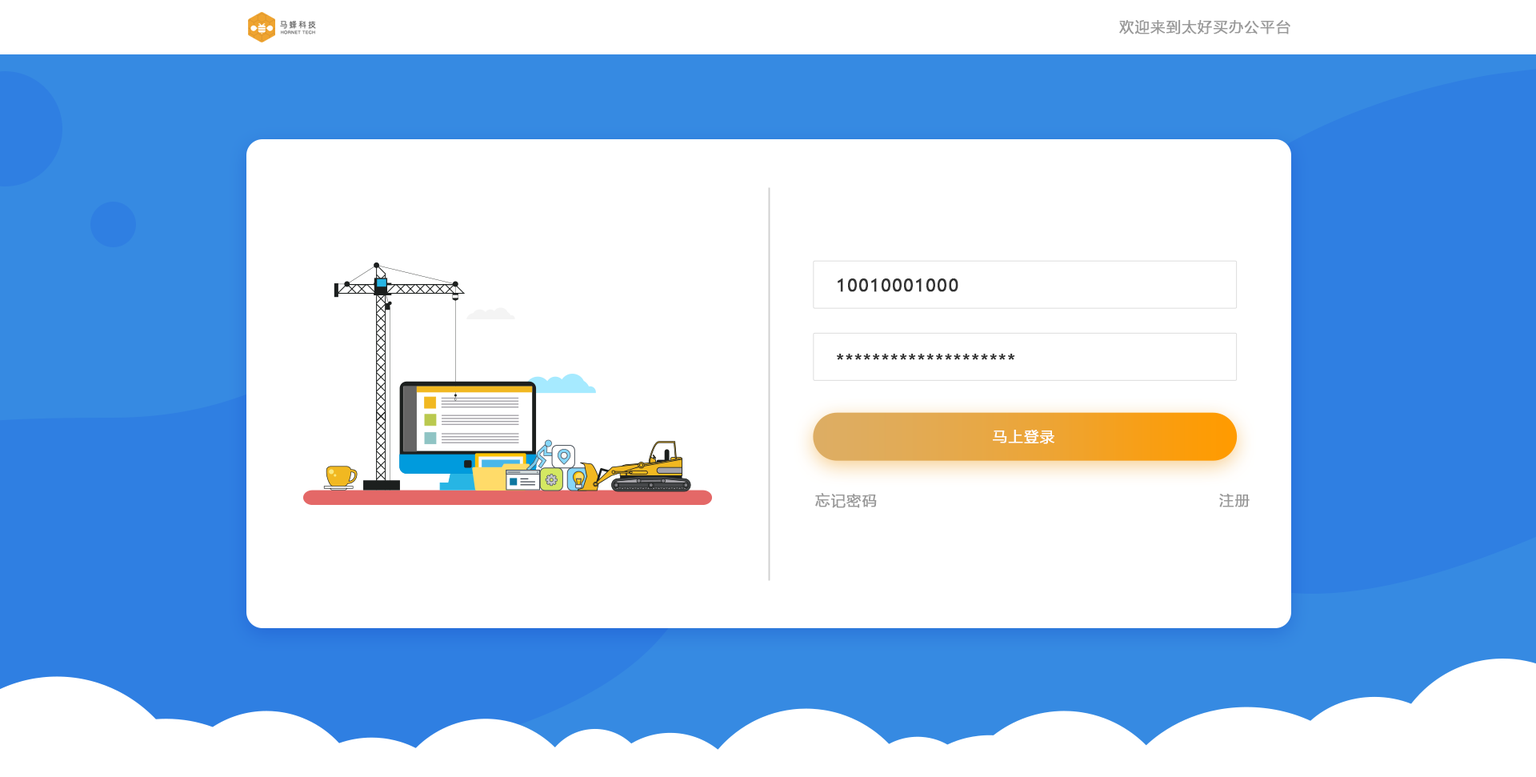
<style>
.page{position:relative;width:1536px;height:777px;background:#ffffff}
.page>*{position:absolute;margin:0}
.t1{font:7.8px "CTZhongYuanSJ";letter-spacing:0.18em;color:#666666}
.t2{font:14.7px "MicrosoftYaHei";letter-spacing:0.03em;color:#999999;font-weight:bold}
.t3{font:4.3px "CTZhongYuanSJ";letter-spacing:0.06em}
.t4{font:17.1px "MicrosoftYaHei";letter-spacing:0.03em;color:#333333;font-weight:bold}
.t5{font:14.7px "MicrosoftYaHei";letter-spacing:0.03em;color:#ffffff;font-weight:bold}
</style>
<div class="page">
<p class="t1" style="left:280px;top:21px;width:36px;height:8px">马蜂科技</p>
<p class="t2" style="left:1119px;top:20px;width:171px;height:14px">欢迎来到太好买办公平台</p>
<p class="t3" style="left:281px;top:30px;width:34px;height:4px">HORNET TECH</p>
<p class="t4" style="left:837px;top:278px;width:121px;height:14px">10010001000</p>
<p class="t4" style="left:837px;top:353px;width:178px;height:7px">********************</p>
<p class="t5" style="left:992px;top:429px;width:62px;height:15px">马上登录</p>
<p class="t2" style="left:815px;top:493px;width:62px;height:15px">忘记密码</p>
<p class="t2" style="left:1219px;top:493px;width:30px;height:14px">注册</p>
</div>
